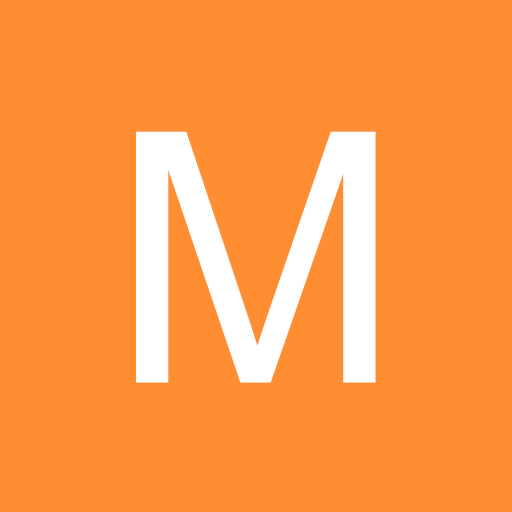
<style>
.page{position:relative;width:512px;height:512px;background:#ff8e32}
.page>*{position:absolute;margin:0}
.t1{font:350px "ArialMT";color:#ffffff}
</style>
<div class="page">
<p class="t1" style="left:136px;top:131px;width:240px;height:252px">M</p>
</div>
